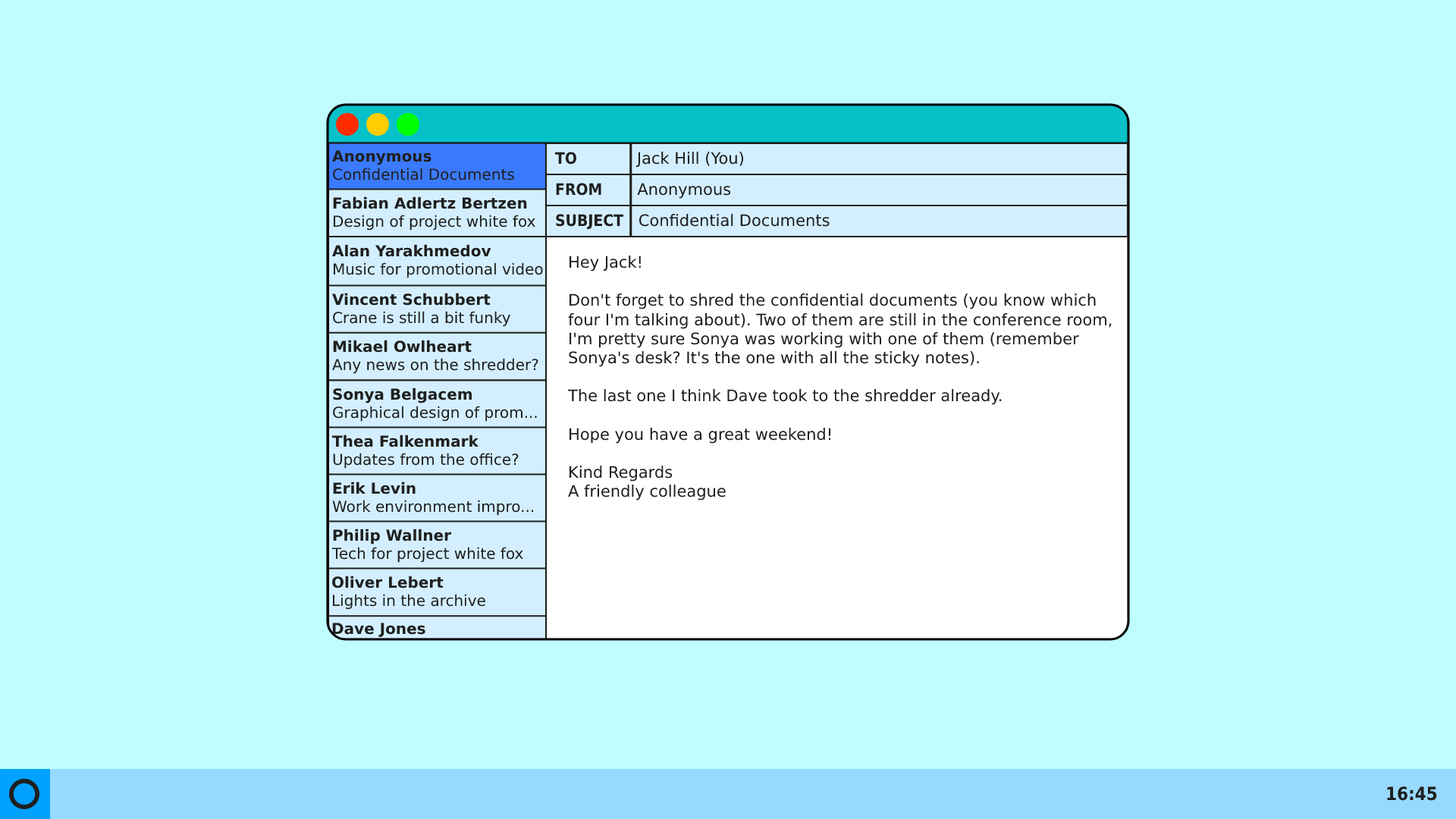
<style>
.page{position:relative;width:1456px;height:819px;background:#bffdff}
.page>*{position:absolute;margin:0}
.t1{font:15.2px "DejaVuSans";color:#1f1f1f}
.t2{font:15.2px "DejaVuSans-Bold";color:#1f1f1f}
.t3{font:15.9px "DejaVuSans";color:#1f1f1f}
.t4{font:15.9px "DejaVuSansCondensed-Bold";color:#1f1f1f}
.t5{font:18.2px "DejaVuSansCondensed-Bold";color:#1f1f1f}
</style>
<div class="page">
<p class="t1" style="left:332px;top:150px;width:182px;height:30px"><span class="t2">Anonymous<br></span>Confidential Documents</p>
<p class="t3" style="left:555px;top:152px;width:189px;height:16px"><span class="t4">TO            </span>Jack Hill (You)</p>
<p class="t3" style="left:556px;top:183px;width:175px;height:16px"><span class="t4">FROM       </span>Anonymous</p>
<p class="t1" style="left:333px;top:196px;width:202px;height:35px"><span class="t2">Fabian Adlertz Bertzen<br></span>Design of project white fox</p>
<p class="t3" style="left:556px;top:214px;width:274px;height:16px"><span class="t4">SUBJECT   </span>Confidential Documents</p>
<p class="t1" style="left:332px;top:244px;width:211px;height:34px"><span class="t2">Alan Yarakhmedov<br></span>Music for promotional video</p>
<p class="t3" style="left:567px;top:256px;width:545px;height:244px">Hey Jack!<br><br>Don't forget to shred the confidential documents (you know which<br>four I'm talking about). Two of them are still in the conference room,<br>I'm pretty sure Sonya was working with one of them (remember<br>Sonya's desk? It's the one with all the sticky notes).<br><br>The last one I think Dave took to the shredder already. <br><br>Hope you have a great weekend!<br><br>Kind Regards<br>A friendly colleague</p>
<p class="t1" style="left:332px;top:293px;width:178px;height:34px"><span class="t2">Vincent Schubbert<br></span>Crane is still a bit funky</p>
<p class="t1" style="left:332px;top:340px;width:206px;height:34px"><span class="t2">Mikael Owlheart<br></span>Any news on the shredder?</p>
<p class="t1" style="left:333px;top:388px;width:204px;height:34px"><span class="t2">Sonya Belgacem<br></span>Graphical design of prom...</p>
<p class="t1" style="left:332px;top:435px;width:187px;height:34px"><span class="t2">Thea Falkenmark<br></span>Updates from the office?</p>
<p class="t1" style="left:332px;top:482px;width:202px;height:34px"><span class="t2">Erik Levin<br></span>Work environment impro...</p>
<p class="t1" style="left:331px;top:529px;width:192px;height:34px"><span class="t2">Philip Wallner<br></span>Tech for project white fox</p>
<p class="t1" style="left:331px;top:576px;width:154px;height:34px"><span class="t2">Oliver Lebert<br></span>Lights in the archive</p>
<p class="t2" style="left:332px;top:623px;width:93px;height:15px">Dave Jones</p>
<p class="t5" style="left:1387px;top:786px;width:50px;height:15px">16:45</p>
</div>
